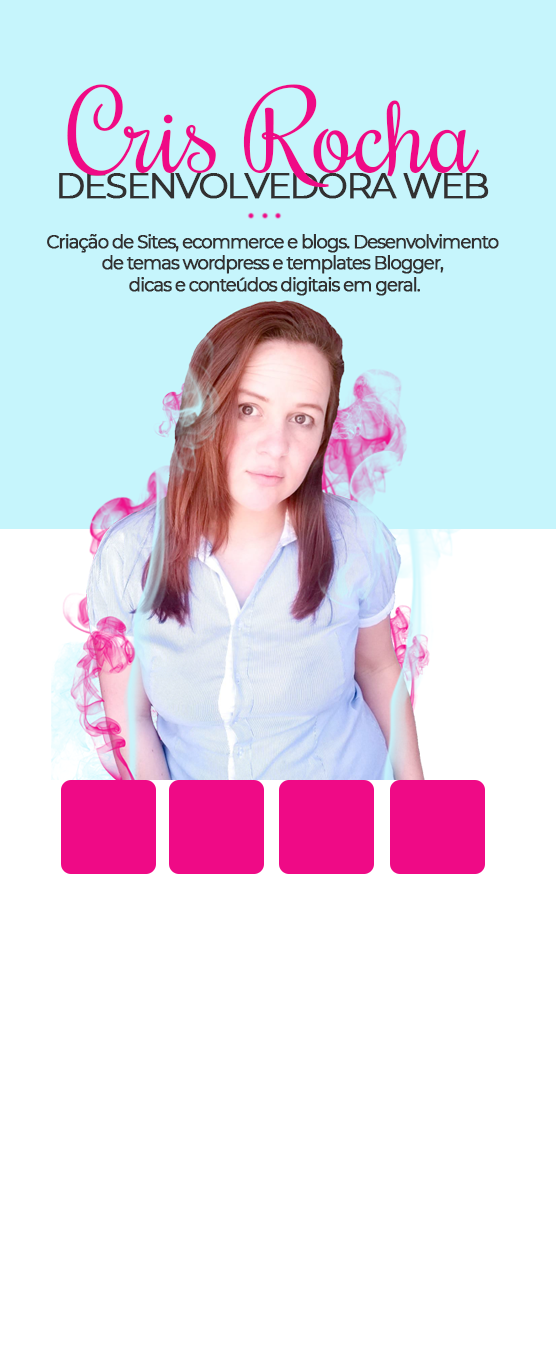
<style>
.page{position:relative;width:556px;height:1356px;background:#ffffff}
.page>*{position:absolute;margin:0}
.t1{font:108px "Rochester-Regular";color:#ef0a86}
.t2{font:36px "Montserrat-Regular";letter-spacing:-0.075em;color:#323131;font-weight:bold}
.t3{font:18px "Montserrat-Regular";letter-spacing:-0.075em;color:#323131;font-weight:bold}
</style>
<div class="page">
<p class="t1" style="left:67px;top:84px;width:413px;height:104px">Cris Rocha</p>
<p class="t2" style="left:59px;top:173px;width:430px;height:26px">DESENVOLVEDORA WEB</p>
<p class="t3" style="left:47px;top:234px;width:452px;height:62px;text-align:center">Criação de Sites, ecommerce e blogs. Desenvolvimento<br>de temas wordpress e templates Blogger,<br> dicas e conteúdos digitais em geral.</p>
</div>
